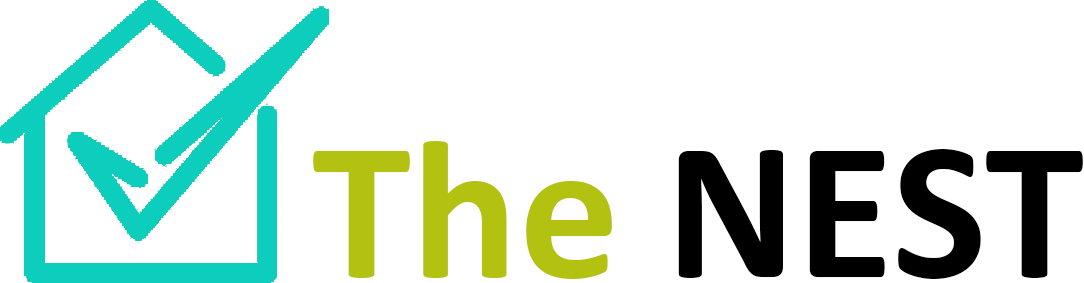
<style>
.page{position:relative;width:1084px;height:283px;background:#ffffff}
.page>*{position:absolute;margin:0}
.t1{font:200px "Calibri-Bold";color:#000000}
.t2{font:200px "Calibri-Bold";color:#b3c211}
</style>
<div class="page">
<p class="t1" style="left:313px;top:141px;width:770px;height:138px"><span class="t2">The </span>NEST</p>
</div>
